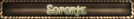
<style>
.page{position:relative;width:134px;height:19px}
.page>*{position:absolute;margin:0}
.t1{font:12px "Morpheus"}
</style>
<div class="page">
<p class="t1" style="left:47px;top:5px;width:40px;height:11px">Soporte</p>
</div>
